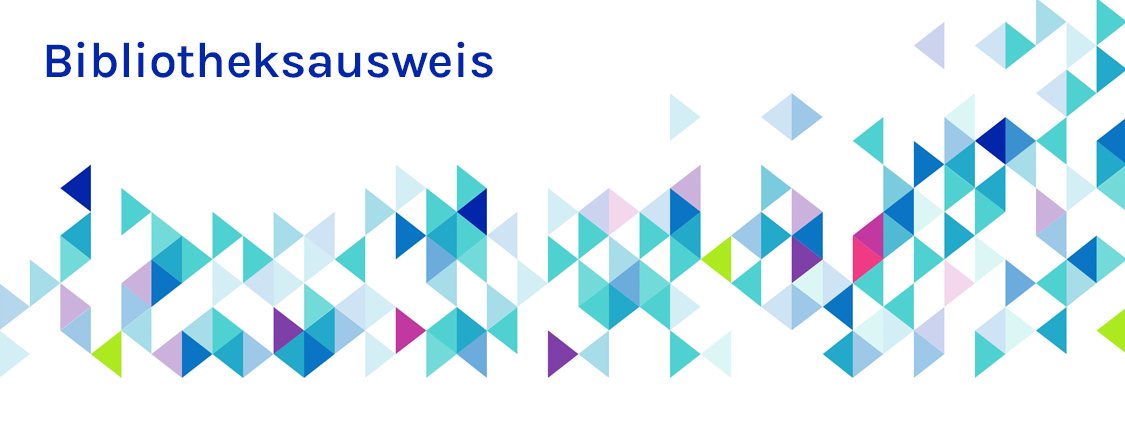
<style>
.page{position:relative;width:1125px;height:432px;background:#ffffff}
.page>*{position:absolute;margin:0}
.t1{font:50px "Karla-SemiBold";letter-spacing:-0.01em;color:#0226aa}
</style>
<div class="page">
<p class="t1" style="left:46px;top:41px;width:447px;height:37px">Bibliotheksausweis</p>
</div>
